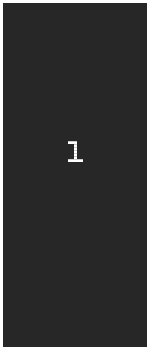
<style>
.page{position:relative;width:150px;height:350px;background:#272727}
.page>*{position:absolute;margin:0}
.t1{font:23.7px "Unibody8Pro-Regular";color:#ffffff}
</style>
<div class="page">
<p class="t1" style="left:68px;top:141px;width:15px;height:21px">1</p>
</div>
